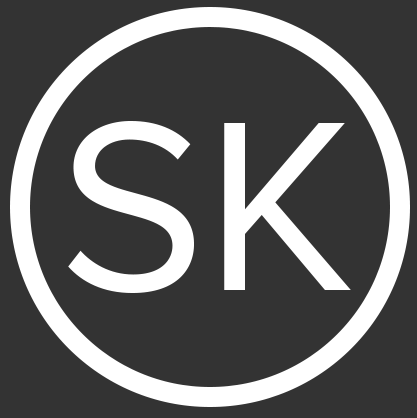
<style>
.page{position:relative;width:417px;height:418px;background:#333333}
.page>*{position:absolute;margin:0}
.t1{font:250px "ProximaNova-Regular";color:#ffffff}
</style>
<div class="page">
<p class="t1" style="left:68px;top:121px;width:283px;height:172px">SK</p>
</div>
